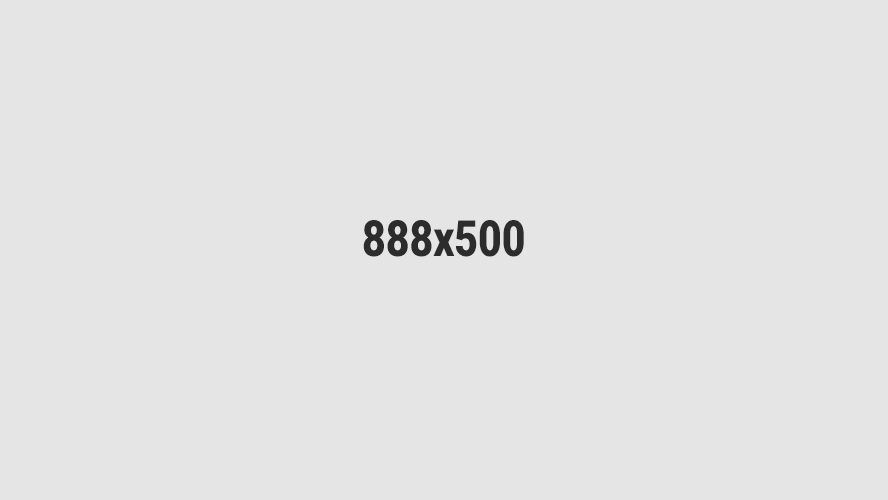
<style>
.page{position:relative;width:888px;height:500px;background:#e5e5e5}
.page>*{position:absolute;margin:0}
.t1{font:50px "Roboto-Black";color:#2c2c2c;scale:0.82 1}
</style>
<div class="page">
<p class="t1" style="left:363px;top:220px;width:161px;height:37px">888x500</p>
</div>
